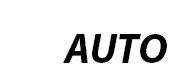
<style>
.page{position:relative;width:184px;height:64px;background:#ffffff}
.page>*{position:absolute;margin:0}
.t1{font:42px "MyriadPro-BoldIt";color:#020202}
</style>
<div class="page">
<p class="t1" style="left:63px;top:34px;width:104px;height:29px">AUTO</p>
</div>
